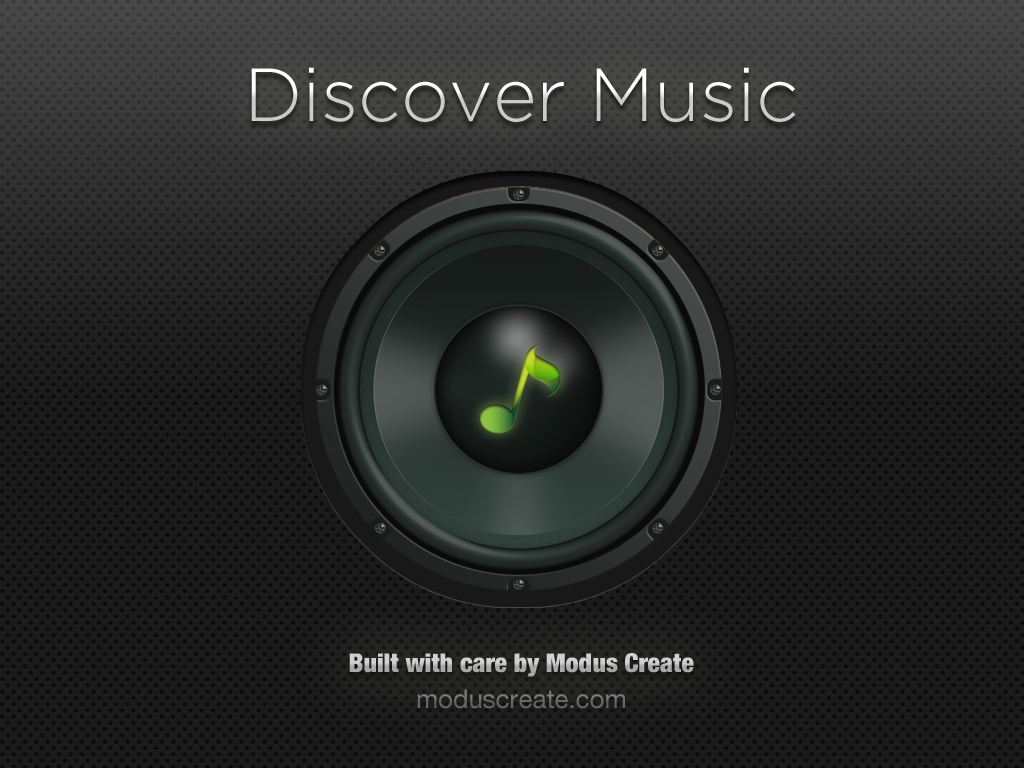
<style>
.page{position:relative;width:1024px;height:768px}
.page>*{position:absolute;margin:0}
.t1{font:75px "GothamHTF-Light"}
.t2{font:26px "HelveticaNeue-CondensedBlack"}
.t3{font:26px "HelveticaNeue";color:#676767}
</style>
<div class="page">
<p class="t1" style="left:251px;top:67px;width:545px;height:55px">Discover Music</p>
<p class="t2" style="left:349px;top:653px;width:345px;height:24px">Built with care by Modus Create</p>
<p class="t3" style="left:417px;top:689px;width:208px;height:20px">moduscreate.com</p>
</div>
